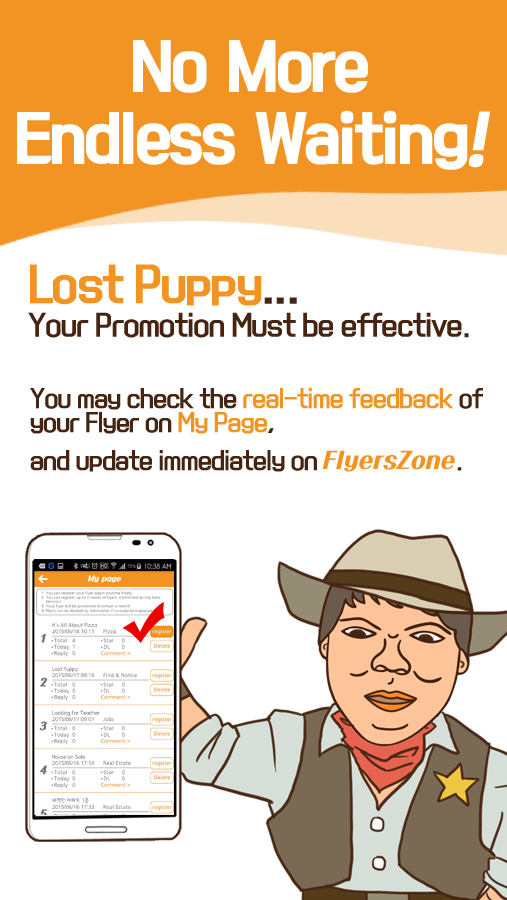
<style>
.page{position:relative;width:507px;height:900px;background:#ffffff}
.page>*{position:absolute;margin:0}
.t1{font:60px/72px "KoreanBLACK-B";letter-spacing:-0.05em;color:#ffffff}
.t2{font:60px/72px "KoreanBLACK-B";letter-spacing:-0.05em;color:#ffffff;font-style:italic}
.t3{font:26px/42px "KoreanYNMYT-M";letter-spacing:-0.05em;color:#462412}
.t4{font:42px/48px "KoreanYNMYT-B";letter-spacing:-0.05em;color:#f29423}
.t5{font:42px/30px "KoreanYNMYT-B";letter-spacing:-0.05em;color:#f29423}
.t6{font:42px/42px "KoreanYNMYT-B";letter-spacing:-0.05em;color:#f29423}
.t7{font:42px/42px "KoreanYNMYT-M";letter-spacing:-0.05em;color:#462412}
.t8{font:22px/24px "KoreanYNMYT-M";letter-spacing:-0.05em;color:#f29423}
.t9{font:22px/24px "KoreanYNMYT-M";letter-spacing:-0.05em;color:#462412}
.t10{font:22px/14px "KoreanYNMYT-M";letter-spacing:-0.05em;color:#462412}
.t11{font:22px/14px "KoreanYNMYT-M";letter-spacing:-0.05em;color:#f29423}
.t12{font:22px/24px "KoreanPDSR-R";color:#f29423}
</style>
<div class="page">
<p class="t1" style="left:17px;top:40px;width:474px;height:130px;text-align:center">No More<br>Endless Waiting<span class="t2">!</span></p>
<p class="t3" style="left:28px;top:264px;width:441px;height:74px"><span class="t4">Lo</span><span class="t5">st P</span><span class="t6">uppy</span><span class="t7">...<br></span>Your Promotion Must be effective.</p>
<p class="t8" style="left:30px;top:388px;width:453px;height:84px"><span class="t9">You may check the </span>real-time feedback<span class="t9"> of<br>your</span><span class="t10"> Flyer on </span><span class="t11">My Page</span><span class="t10">, <br><br>and update</span><span class="t9"> immediately on </span><span class="t12">FlyersZone</span><span class="t9">.</span></p>
</div>
